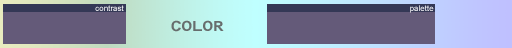
<style>
.page{position:relative;width:512px;height:48px;background:#645a79}
.page>*{position:absolute;margin:0}
.t1{font:8px "ArialMT"}
.t2{font:14px "ArialAlternative";color:#676d6d}
</style>
<div class="page">
<p class="t1" style="left:95px;top:5px;width:29px;height:6px">contrast</p>
<p class="t1" style="left:410px;top:5px;width:24px;height:8px">palette</p>
<p class="t2" style="left:171px;top:20px;width:53px;height:12px">COLOR</p>
</div>
